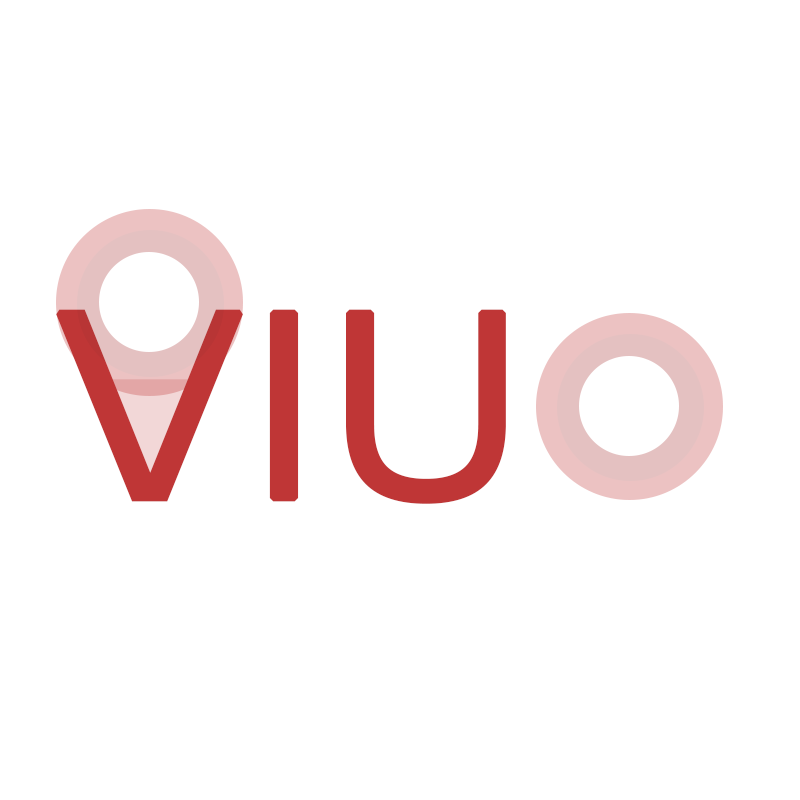
<style>
.page{position:relative;width:800px;height:800px;background:#ffffff}
.page>*{position:absolute;margin:0}
.t1{font:250px "EncodeSansExpanded-Regular";color:#bf3636;text-transform:uppercase;font-weight:bold}
.t2{font:250px "EncodeSansExpanded-Regular";color:#ffffff;text-transform:uppercase;font-weight:bold}
</style>
<div class="page">
<p class="t1" style="left:56px;top:307px;width:671px;height:197px">viu<span class="t2">o</span></p>
</div>
